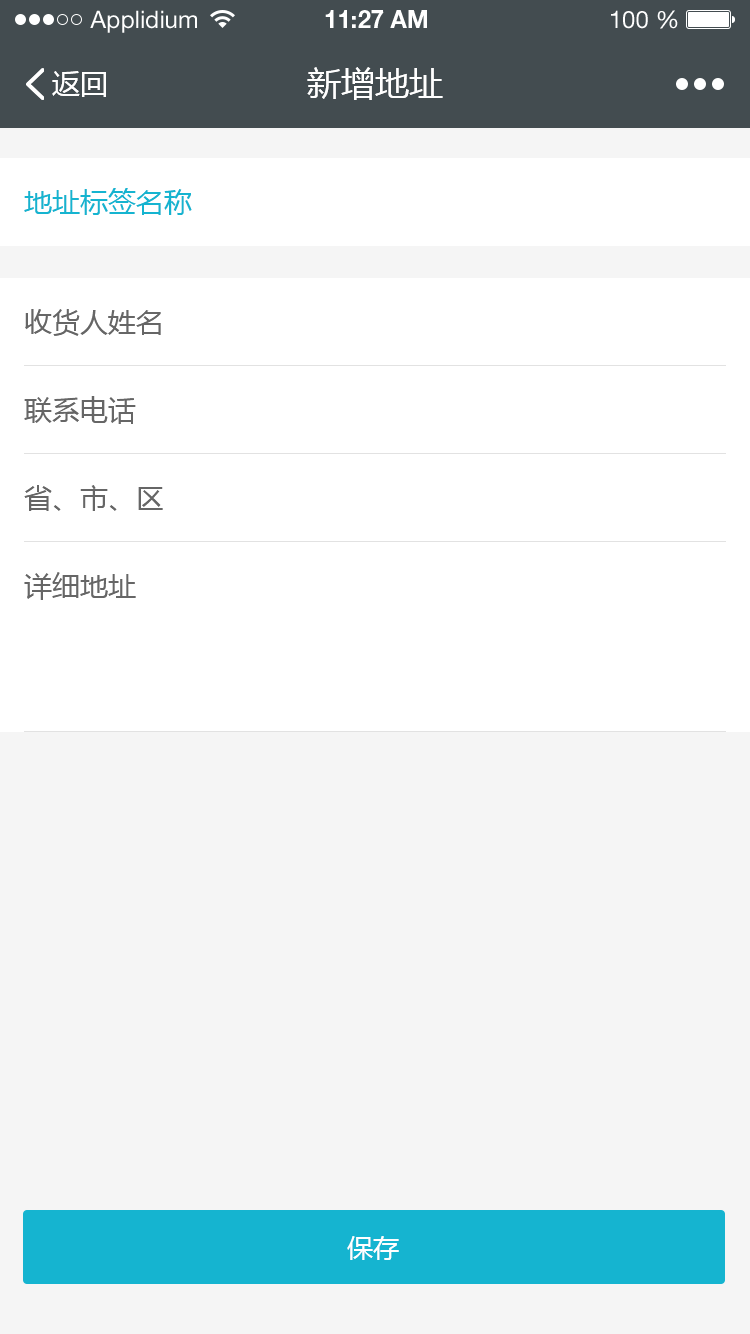
<style>
.page{position:relative;width:750px;height:1334px;background:#f5f5f5}
.page>*{position:absolute;margin:0}
.t1{font:24px "HelveticaNeueLTStd-Roman";color:#ffffff}
.t2{font:24px "HelveticaNeueLTStd-Bd";color:#ffffff}
.t3{font:28px "MicrosoftYaHei";color:#ffffff}
.t4{font:34px "MicrosoftYaHei";color:#ffffff}
.t5{font:28px "MicrosoftYaHei";color:#15b4d0}
.t6{font:28px "MicrosoftYaHei";color:#666666}
.t7{font:26px "MicrosoftYaHei";color:#ffffff}
</style>
<div class="page">
<p class="t1" style="left:90px;top:10px;width:107px;height:23px">Applidium</p>
<p class="t2" style="left:325px;top:10px;width:102px;height:18px">11:27 AM</p>
<p class="t1" style="left:611px;top:10px;width:67px;height:19px">100 %</p>
<p class="t3" style="left:52px;top:71px;width:54px;height:26px">返回</p>
<p class="t4" style="left:307px;top:67px;width:136px;height:33px">新增地址</p>
<p class="t5" style="left:24px;top:188px;width:168px;height:27px">地址标签名称</p>
<p class="t6" style="left:25px;top:309px;width:136px;height:27px">收货人姓名</p>
<p class="t6" style="left:24px;top:396px;width:112px;height:28px">联系电话</p>
<p class="t6" style="left:24px;top:485px;width:139px;height:26px">省、市、区</p>
<p class="t6" style="left:24px;top:572px;width:112px;height:28px">详细地址</p>
<p class="t7" style="left:347px;top:1236px;width:52px;height:24px">保存</p>
</div>
